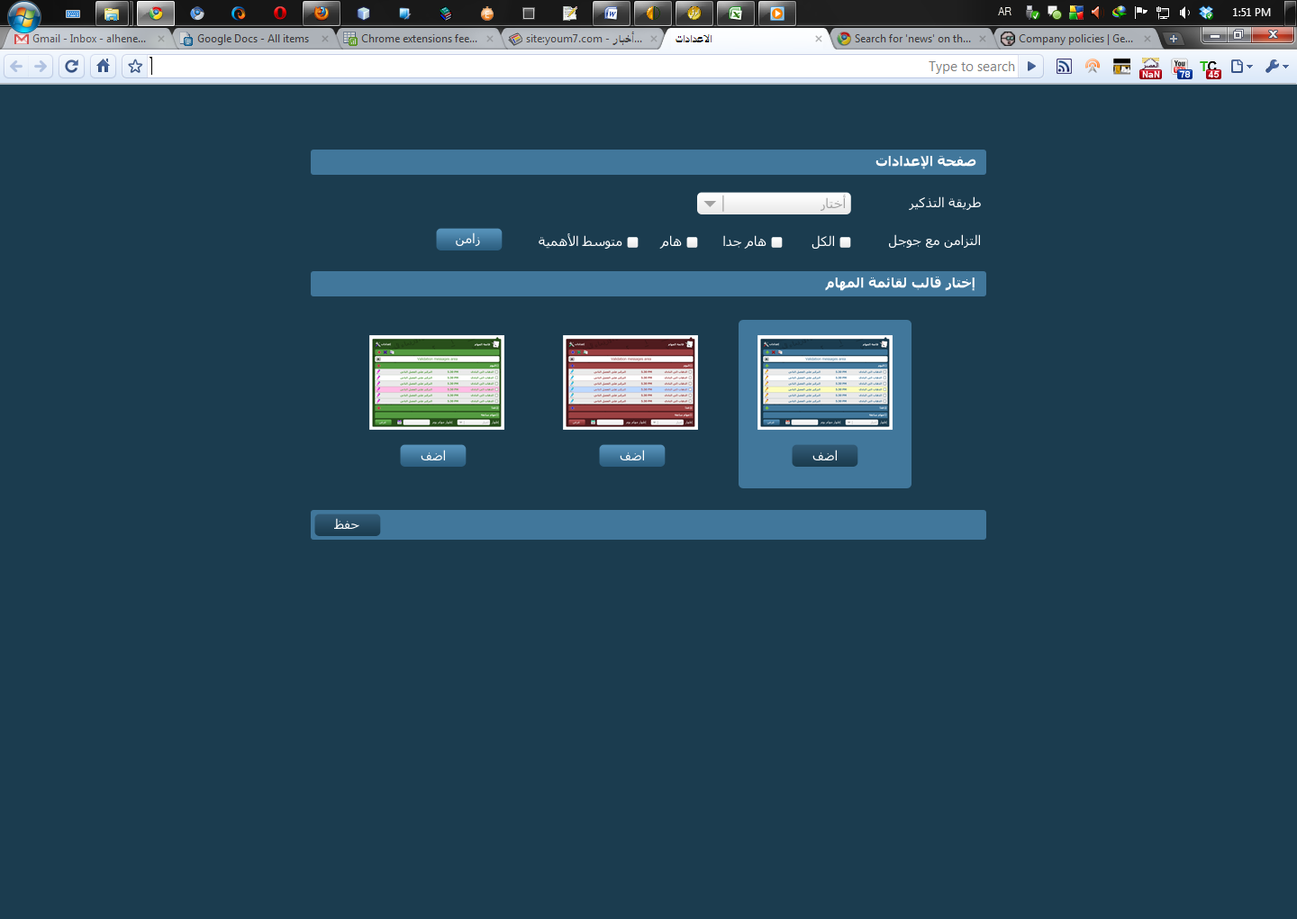
<style>
.page{position:relative;width:1297px;height:919px;background:#1b3c4f}
.page>*{position:absolute;margin:0}
.t1{font:13.4px "Tahoma-Bold";color:#ffffff}
.t2{font:13.2px "Tahoma";color:#a2a2a2}
.t3{font:13.2px "Tahoma";color:#ffffff}
</style>
<div class="page">
<p class="t1" style="left:876px;top:156px;width:101px;height:13px">صفحة الإعدادات</p>
<p class="t2" style="left:821px;top:195px;width:25px;height:16px">أختار</p>
<p class="t3" style="left:909px;top:196px;width:72px;height:14px">طريقة التذكير</p>
<p class="t3" style="left:456px;top:232px;width:24px;height:14px">زامن</p>
<p class="t3" style="left:539px;top:233px;width:84px;height:16px">متوسط الأهمية</p>
<p class="t3" style="left:660px;top:235px;width:22px;height:14px">هام</p>
<p class="t3" style="left:724px;top:235px;width:43px;height:14px">هام جدا</p>
<p class="t3" style="left:812px;top:235px;width:22px;height:14px">الكل</p>
<p class="t3" style="left:889px;top:234px;width:91px;height:14px">التزامن مع جوجل</p>
<p class="t1" style="left:825px;top:277px;width:150px;height:14px">إختار قالب لقائمة المهام</p>
<p class="t3" style="left:421px;top:450px;width:24px;height:10px">اضف</p>
<p class="t3" style="left:620px;top:450px;width:24px;height:10px">اضف</p>
<p class="t3" style="left:813px;top:450px;width:24px;height:10px">اضف</p>
<p class="t3" style="left:334px;top:518px;width:26px;height:11px">حفظ</p>
</div>
